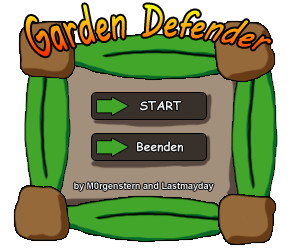
<style>
.page{position:relative;width:300px;height:250px;background:#ffffff}
.page>*{position:absolute;margin:0}
.t1{font:40px "MVBoli";scale:0.74 1}
.t2{font:12px "ComicSansMS-Bold";color:#eeeeee}
.t3{font:9px "Arial-BoldMT";color:#eeeeee}
</style>
<div class="page">
<p class="t1" style="left:25px;top:4px;width:246px;height:53px">Garden Defender</p>
<p class="t2" style="left:140px;top:101px;width:42px;height:10px">START</p>
<p class="t2" style="left:137px;top:141px;width:46px;height:11px">Beenden</p>
<p class="t3" style="left:74px;top:182px;width:140px;height:9px">by M0rgenstern and Lastmayday</p>
</div>
